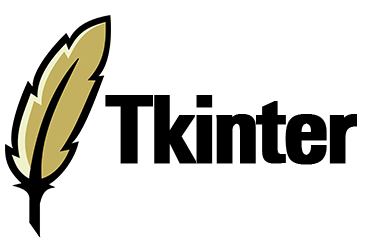
<style>
.page{position:relative;width:371px;height:245px;background:#ffffff}
.page>*{position:absolute;margin:0}
.t1{font:93.3px "ZurichBT-BoldCondensed";letter-spacing:-0.05em;color:#000000;font-weight:bold}
</style>
<div class="page">
<p class="t1" style="left:105px;top:95px;width:252px;height:70px">Tkinter</p>
</div>
